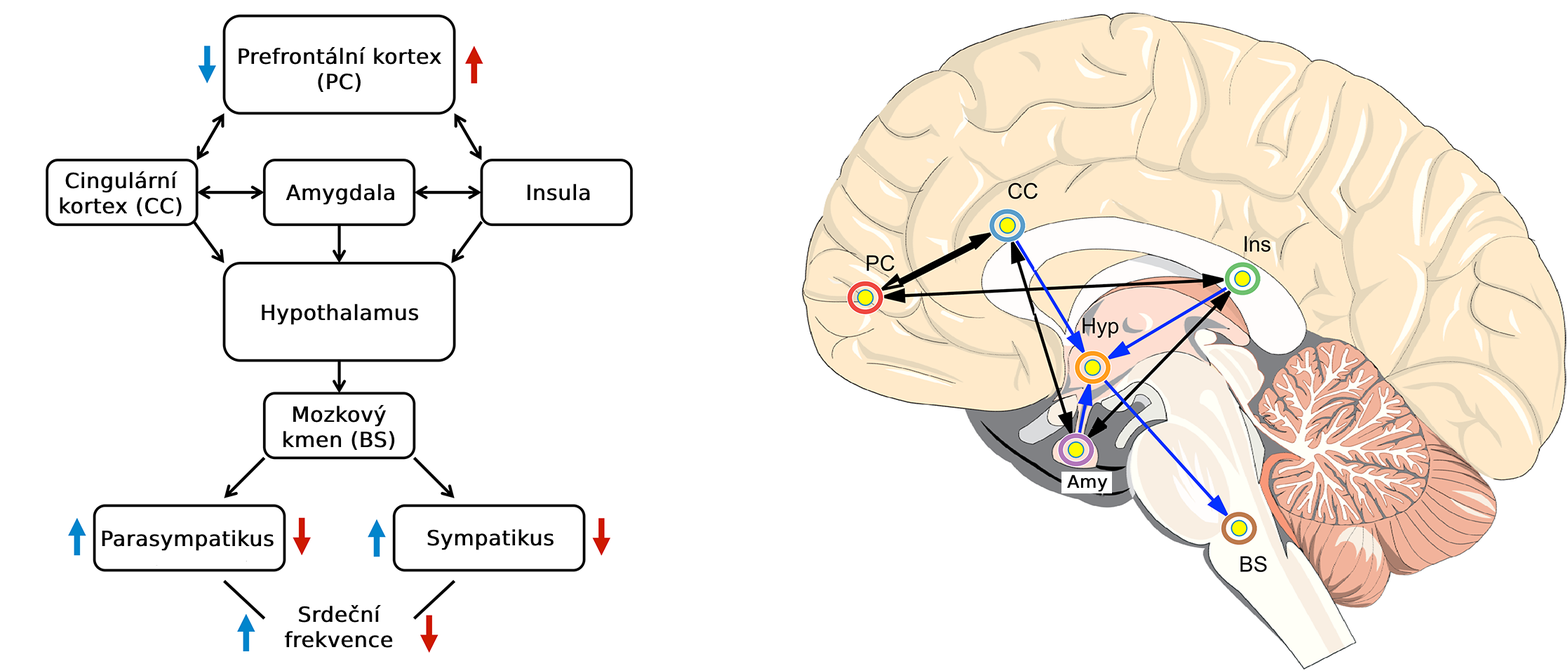
<style>
.page{position:relative;width:1568px;height:671px;background:#ffffff}
.page>*{position:absolute;margin:0}
.t1{font:21px "DejaVuSans";color:#000000;font-weight:bold}
.t2{font:17.5px "DejaVuSans";color:#000000;font-weight:bold}
</style>
<div class="page">
<p class="t1" style="left:239px;top:47px;width:202px;height:45px;text-align:center">Prefrontální kortex<br>(PC)</p>
<p class="t1" style="left:60px;top:171px;width:122px;height:45px;text-align:center">Cingulární<br>kortex (CC)</p>
<p class="t1" style="left:286px;top:184px;width:108px;height:21px">Amygdala</p>
<p class="t1" style="left:527px;top:184px;width:63px;height:17px">Insula</p>
<p class="t1" style="left:262px;top:304px;width:157px;height:21px">Hypothalamus</p>
<p class="t1" style="left:283px;top:405px;width:112px;height:45px;text-align:center">Mozkový<br>kmen (BS)</p>
<p class="t2" style="left:1067px;top:474px;width:41px;height:18px">Amy</p>
<p class="t1" style="left:102px;top:530px;width:172px;height:21px">Parasympatikus</p>
<p class="t1" style="left:427px;top:529px;width:127px;height:21px">Sympatikus</p>
<p class="t1" style="left:284px;top:605px;width:109px;height:43px;text-align:center">Srdeční<br>frekvence</p>
</div>
